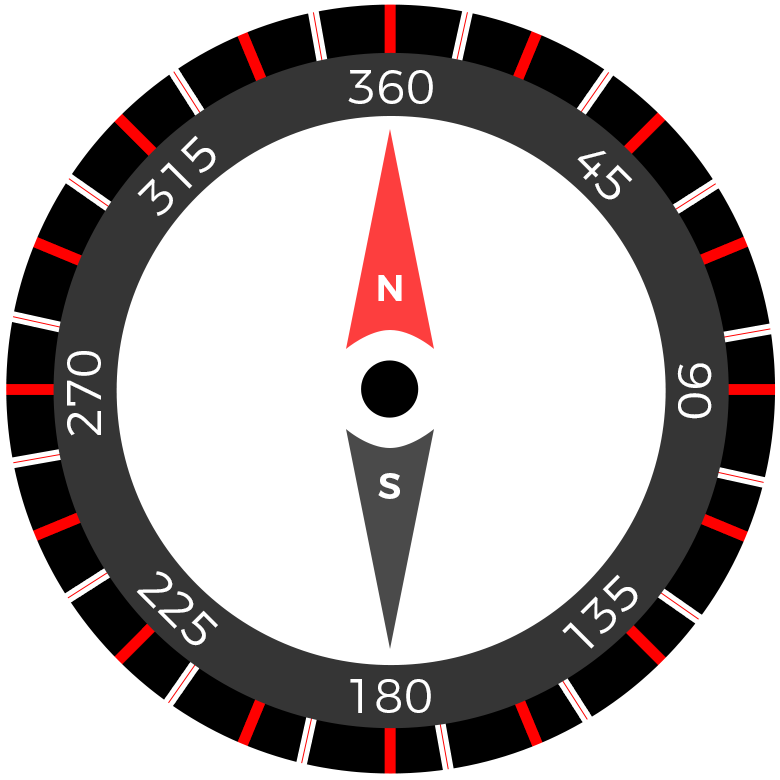
<style>
.page{position:relative;width:780px;height:780px;background:#ffffff}
.page>*{position:absolute;margin:0}
.t1{font:47.3px "Montserrat-Light";color:#ffffff}
.t2{font:36px "Montserrat-SemiBold";color:#ffffff}
</style>
<div class="page">
<p class="t1" style="left:348px;top:70px;width:85px;height:34px">360</p>
<p class="t1" style="left:137px;top:135px;width:79px;height:81px;rotate:-45deg">315</p>
<p class="t1" style="left:577px;top:150px;width:56px;height:50px;rotate:45deg">45</p>
<p class="t2" style="left:378px;top:275px;width:24px;height:26px">N</p>
<p class="t1" style="left:67px;top:351px;width:34px;height:85px;rotate:-90deg">270</p>
<p class="t1" style="left:677px;top:363px;width:35px;height:56px;rotate:90deg">90</p>
<p class="t2" style="left:378px;top:473px;width:22px;height:26px">S</p>
<p class="t1" style="left:136px;top:571px;width:82px;height:75px;rotate:45deg">225</p>
<p class="t1" style="left:562px;top:574px;width:76px;height:75px;rotate:-45deg">135</p>
<p class="t1" style="left:350px;top:679px;width:81px;height:34px">180</p>
</div>
